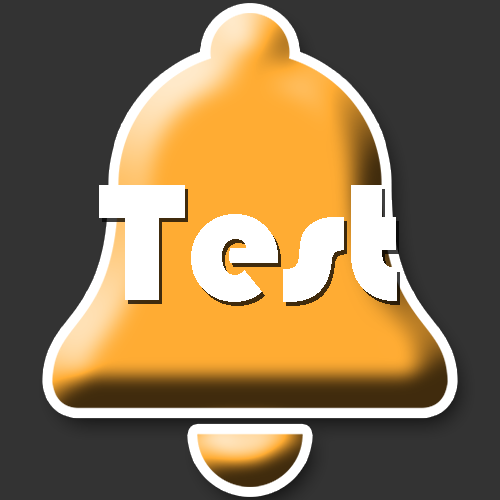
<style>
.page{position:relative;width:500px;height:500px;background:#333333}
.page>*{position:absolute;margin:0}
.t1{font:172px "Bauhaus93";color:#ffffff}
</style>
<div class="page">
<p class="t1" style="left:99px;top:185px;width:298px;height:117px">Test</p>
</div>
